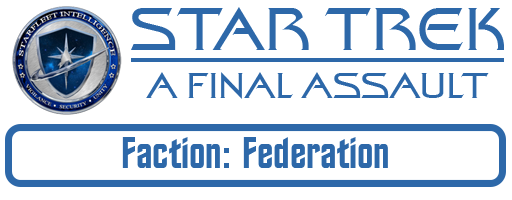
<style>
.page{position:relative;width:512px;height:200px;background:#ffffff}
.page>*{position:absolute;margin:0}
.t1{font:60px "StarTrekFilmBT-Regular";color:#2d68a9}
.t2{font:36px "StarTrekFilmBT-Regular";color:#2d68a9}
.t3{font:44px "StarTrekBT-Regular";color:#2d68a9}
</style>
<div class="page">
<p class="t1" style="left:131px;top:7px;width:373px;height:43px">STAR TREK</p>
<p class="t2" style="left:146px;top:72px;width:343px;height:27px">A FINAL ASSAULT</p>
<p class="t3" style="left:122px;top:137px;width:266px;height:31px">Faction: Federation</p>
</div>
